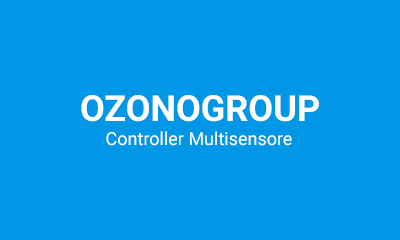
<style>
.page{position:relative;width:400px;height:240px;background:#0097e6}
.page>*{position:absolute;margin:0}
.t1{font:36px "Roboto-Bold";color:#ffffff}
.t2{font:18px "Roboto-Regular";color:#ffffff}
</style>
<div class="page">
<p class="t1" style="left:81px;top:95px;width:238px;height:27px">OZONOGROUP</p>
<p class="t2" style="left:106px;top:131px;width:186px;height:15px">Controller Multisensore</p>
</div>
